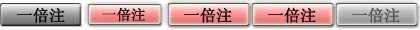
<style>
.page{position:relative;width:420px;height:30px}
.page>*{position:absolute;margin:0}
.t1{font:16px "SimSun";color:#010101;font-weight:bold}
.t2{font:14.4px "SimSun";color:#000000;font-weight:bold}
.t3{font:16px "SimSun";color:#000000;font-weight:bold}
.t4{font:16px "SimSun";color:#4d4d4d;font-weight:bold}
</style>
<div class="page">
<p class="t1" style="left:17px;top:7px;width:48px;height:16px">一倍注</p>
<p class="t2" style="left:102px;top:7px;width:43px;height:15px">一倍注</p>
<p class="t3" style="left:184px;top:7px;width:48px;height:16px">一倍注</p>
<p class="t3" style="left:268px;top:7px;width:48px;height:16px">一倍注</p>
<p class="t4" style="left:352px;top:7px;width:48px;height:16px">一倍注</p>
</div>
